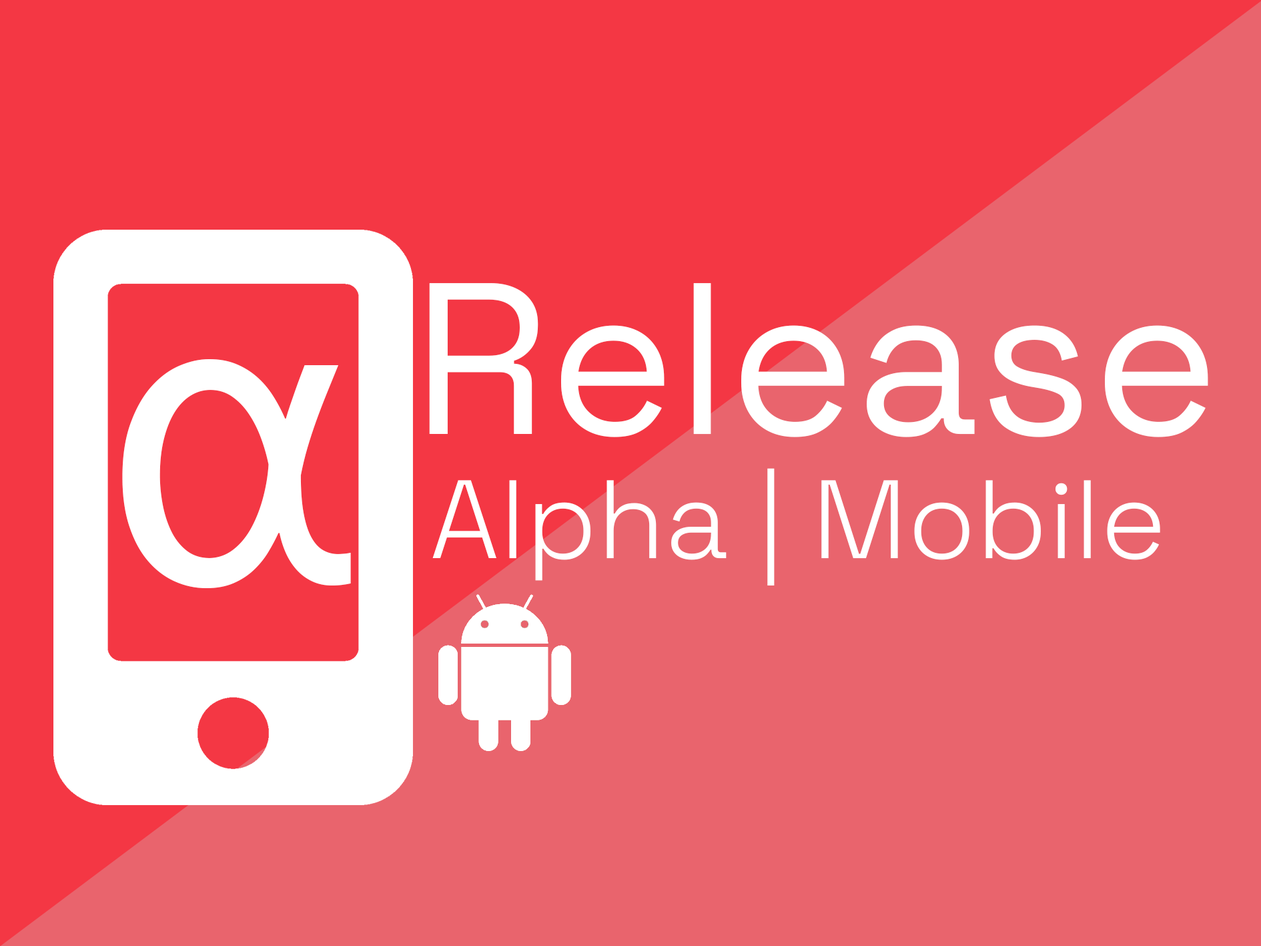
<style>
.page{position:relative;width:1261px;height:946px;background:#e9646d}
.page>*{position:absolute;margin:0}
.t1{font:215.3px "SpaceGrotesk-Regular";color:#ffffff}
.t2{font:467.9px "Corbel";color:#ffffff}
.t3{font:111.1px "SpaceGrotesk-Light";color:#ffffff}
</style>
<div class="page">
<p class="t1" style="left:429px;top:283px;width:779px;height:154px">Release</p>
<p class="t2" style="left:122px;top:359px;width:229px;height:229px">α</p>
<p class="t3" style="left:432px;top:468px;width:728px;height:117px">Alpha | Mobile</p>
</div>
